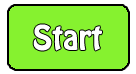
<style>
.page{position:relative;width:136px;height:74px;background:#86f22f}
.page>*{position:absolute;margin:0}
.t1{font:30px "HoboStd";color:#ffffff}
</style>
<div class="page">
<p class="t1" style="left:33px;top:24px;width:69px;height:27px">Start</p>
</div>
